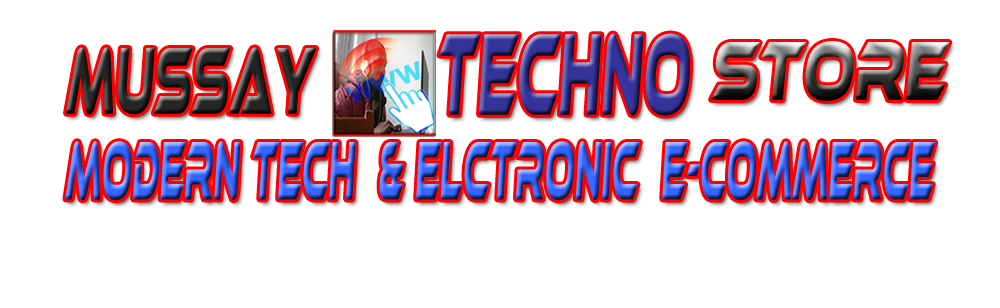
<style>
.page{position:relative;width:1000px;height:308px;background:#ffffff}
.page>*{position:absolute;margin:0}
.t1{font:118.9px "EthnocentricRg-Regular";letter-spacing:0.005em;font-weight:bold;font-style:italic;scale:0.37 1}
.t2{font:85.6px "EthnocentricRg-Regular";letter-spacing:0.005em;font-weight:bold;font-style:italic;scale:0.55 1}
.t3{font:96.9px "EthnocentricRg-Regular";letter-spacing:0.005em;color:#252525;font-weight:bold;font-style:italic;scale:0.39 1}
.t4{font:84px "EthnocentricRg-Regular";letter-spacing:0.005em;font-weight:bold;font-style:italic;scale:0.33 1}
</style>
<div class="page">
<p class="t1" style="left:439px;top:33px;width:251px;height:83px">techno</p>
<p class="t2" style="left:711px;top:41px;width:239px;height:60px">store</p>
<p class="t3" style="left:66px;top:47px;width:251px;height:68px">MUssay</p>
<p class="t4" style="left:65px;top:141px;width:871px;height:60px">modern tech  &amp; elctronic  e-commerce</p>
</div>
